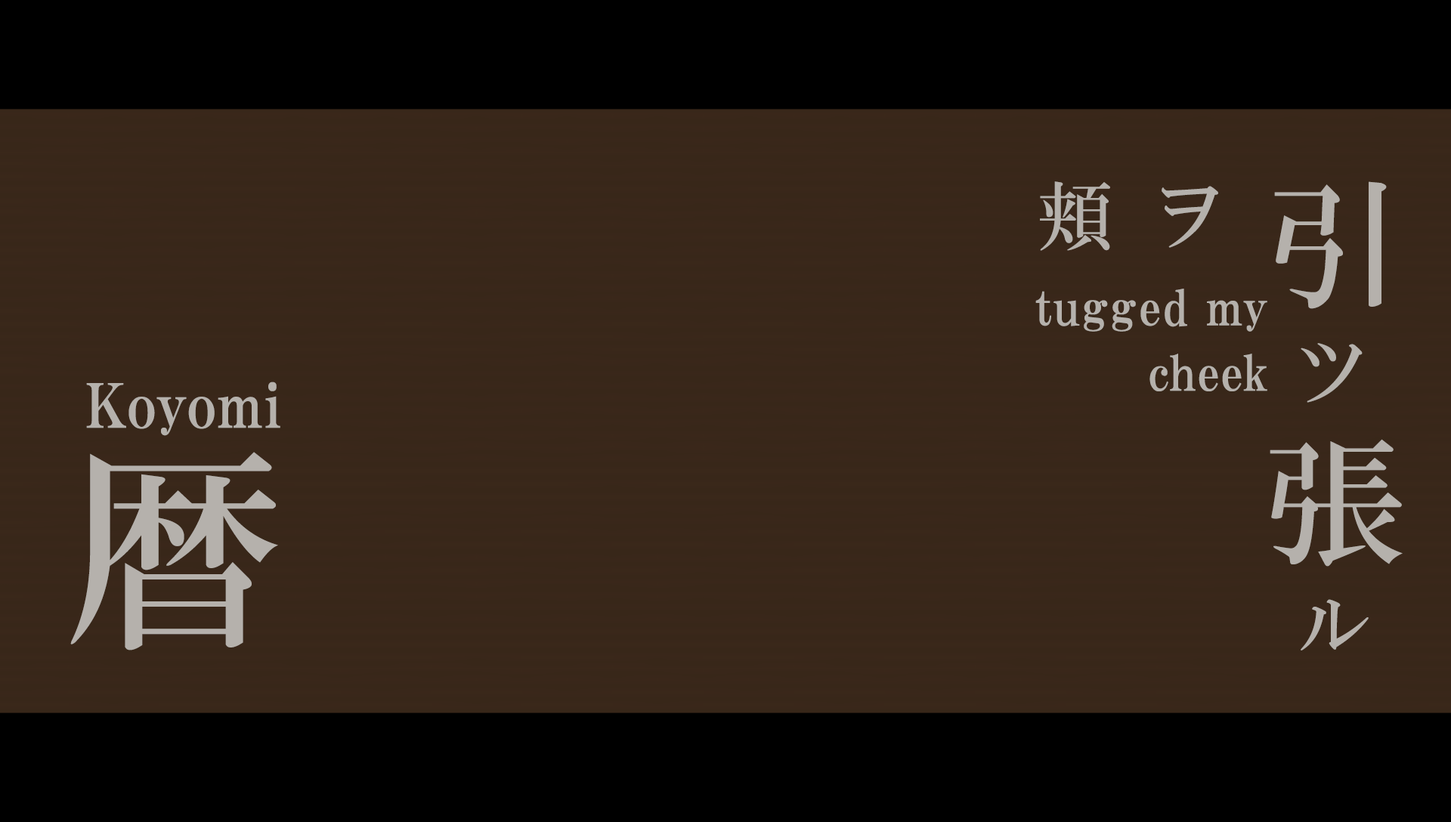
<style>
.page{position:relative;width:1451px;height:822px;background:#382719}
.page>*{position:absolute;margin:0}
.t1{font:74.8px "HGMinchoB";letter-spacing:0.51em;color:#b5b1ac}
.t2{font:141.3px "HGMinchoB";letter-spacing:0.29em;color:#b5b1ac}
.t3{font:48.4px/65.5px "HGPMinchoE";letter-spacing:0.01em;color:#b5b1ac}
.t4{font:48.4px/65.5px "HGPMinchoE";letter-spacing:0.025em;color:#b5b1ac}
.t5{font:60.4px "HGPMinchoE";letter-spacing:0.01em;color:#b5b1ac}
.t6{font:218.3px "HGMinchoB";letter-spacing:0.29em;color:#b5b1ac}
</style>
<div class="page">
<p class="t1" style="left:1040px;top:181px;width:178px;height:70px">頬ヲ</p>
<p class="t2" style="left:1269px;top:181px;width:133px;height:386px">引<br><br>張</p>
<p class="t3" style="left:1035px;top:289px;width:232px;height:102px;text-align:right"><span class="t4">tugged </span>my<br>cheek</p>
<p class="t1" style="left:1300px;top:343px;width:68px;height:308px">ツ<br><br><br>ル</p>
<p class="t5" style="left:86px;top:382px;width:194px;height:54px">Koyomi</p>
<p class="t6" style="left:70px;top:452px;width:208px;height:199px">暦</p>
</div>
